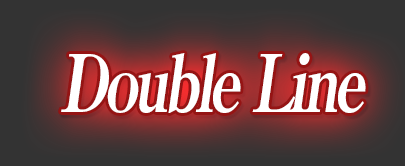
<style>
.page{position:relative;width:405px;height:166px}
.page>*{position:absolute;margin:0}
.t1{font:80px "RyuminPro-ExBold";letter-spacing:-0.08em;color:#ffffff;font-style:italic;scale:0.8 1}
</style>
<div class="page">
<p class="t1" style="left:61px;top:53px;width:305px;height:60px">Double Line</p>
</div>
